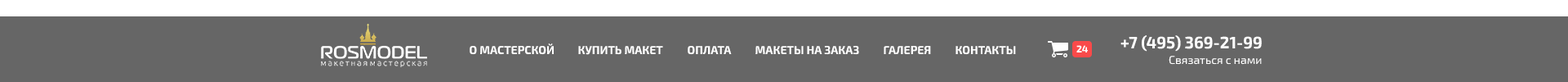
<style>
.page{position:relative;width:1568px;height:82px;background:#666666}
.page>*{position:absolute;margin:0}
.t1{font:16.3px "Exo2-Bold";color:#ffffff}
.t2{font:11.4px "Exo2-Bold";color:#ffffff;text-transform:uppercase}
.t3{font:9.8px "Exo2-Bold";color:#ffffff}
.t4{font:11.4px "Exo2-Regular";color:#ffffff}
</style>
<div class="page">
<p class="t1" style="left:1120px;top:35px;width:142px;height:16px">+7 (495) 369-21-99</p>
<p class="t2" style="left:470px;top:43px;width:84px;height:12px">О мастерской</p>
<p class="t2" style="left:578px;top:46px;width:85px;height:9px">Купить макет</p>
<p class="t2" style="left:688px;top:46px;width:44px;height:9px">Оплата</p>
<p class="t2" style="left:755px;top:46px;width:104px;height:9px">Макеты на заказ</p>
<p class="t2" style="left:884px;top:46px;width:47px;height:8px">Галерея</p>
<p class="t2" style="left:956px;top:46px;width:60px;height:9px">Контакты</p>
<p class="t3" style="left:1076px;top:45px;width:12px;height:7px">24</p>
<p class="t4" style="left:1169px;top:56px;width:93px;height:9px">Связаться с нами</p>
</div>
